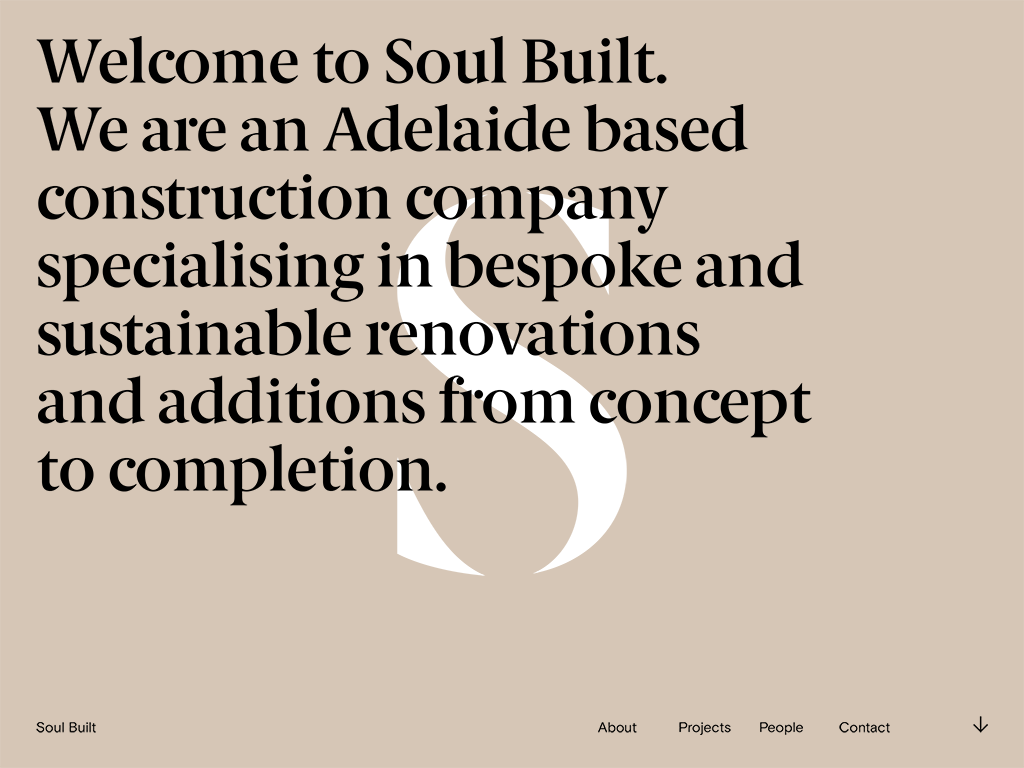
<style>
.page{position:relative;width:1024px;height:768px;background:#d6c6b6}
.page>*{position:absolute;margin:0}
.t1{font:62px "BerlingskeSerif-DemiBold";letter-spacing:-0.009em;color:#000000}
.t2{font:62px "BerlingskeSerif-DemiBold";letter-spacing:-0.079em;color:#000000}
.t3{font:62px "BerlingskeSerif-DemiBold";letter-spacing:-0.01em;color:#000000}
.t4{font:62px "BerlingskeSerif-DemiBold";letter-spacing:-0.029em;color:#000000}
.t5{font:62px "BerlingskeSerif-DemiBold";letter-spacing:-0.02em;color:#000000}
.t6{font:62px "BerlingskeSerif-DemiBold";color:#000000}
.t7{font:62px "BerlingskeSerif-DemiBold";letter-spacing:-0.04em;color:#000000}
.t8{font:62px "BerlingskeSerif-DemiBold";letter-spacing:-0.039em;color:#000000}
.t9{font:62px "BerlingskeSerif-DemiBold";letter-spacing:-0.049em;color:#000000}
.t10{font:62px "BerlingskeSerif-DemiBold";letter-spacing:-0.043em;color:#000000}
.t11{font:62px "BerlingskeSerif-DemiBold";letter-spacing:-0.05em;color:#000000}
.t12{font:14px "BasisGrotesquePro";color:#000000}
.t13{font:14px "BasisGrotesquePro";letter-spacing:-0.007em;color:#000000}
.t14{font:14px "BasisGrotesquePro";letter-spacing:-0.002em;color:#000000}
.t15{font:14px "BasisGrotesquePro";letter-spacing:-0.025em;color:#000000}
.t16{font:14px "BasisGrotesquePro";letter-spacing:-0.023em;color:#000000}
.t17{font:14px "BasisGrotesquePro";letter-spacing:-0.009em;color:#000000}
.t18{font:14px "BasisGrotesquePro";letter-spacing:-0.003em;color:#000000}
.t19{font:14px "BasisGrotesquePro";letter-spacing:-0.008em;color:#000000}
.t20{font:14px "BasisGrotesquePro";letter-spacing:-0.057em;color:#000000}
.t21{font:14px "BasisGrotesquePro";letter-spacing:-0.019em;color:#000000}
.t22{font:14px "BasisGrotesquePro";letter-spacing:-0.026em;color:#000000}
.t23{font:14px "BasisGrotesquePro";letter-spacing:-0.005em;color:#000000}
</style>
<div class="page">
<p class="t1" style="left:36px;top:36px;width:631px;height:48px"><span class="t2">W</span>e<span class="t3">l</span><span class="t4">c</span>ome to So<span class="t3">u</span>l <span class="t5">B</span>u<span class="t3">il</span>t<span class="t6">.</span></p>
<p class="t1" style="left:36px;top:104px;width:713px;height:48px"><span class="t2">W</span>e a<span class="t4">r</span>e <span class="t3">a</span>n <span class="t7">A</span>de<span class="t3">l</span>a<span class="t3">id</span>e b<span class="t3">a</span>se<span class="t6">d</span></p>
<p class="t1" style="left:38px;top:174px;width:631px;height:60px"><span class="t4">c</span>on<span class="t8">s</span>truction <span class="t4">c</span>om<span class="t3">pa</span><span class="t9">n</span><span class="t6">y</span></p>
<p class="t1" style="left:38px;top:240px;width:766px;height:62px">speci<span class="t3">a</span>li<span class="t3">s</span>ing <span class="t3">i</span>n be<span class="t3">sp</span>o<span class="t10">k</span>e an<span class="t6">d</span></p>
<p class="t1" style="left:38px;top:308px;width:662px;height:48px"><span class="t8">s</span>u<span class="t8">s</span>tainable <span class="t4">r</span>en<span class="t9">o</span><span class="t11">v</span><span class="t3">a</span>tion<span class="t6">s</span></p>
<p class="t1" style="left:38px;top:375px;width:774px;height:63px">an<span class="t3">d</span> a<span class="t3">d</span>ditions <span class="t3">f</span><span class="t4">r</span>o<span class="t3">m </span><span class="t4">c</span>on<span class="t4">c</span>ep<span class="t6">t</span></p>
<p class="t1" style="left:37px;top:444px;width:409px;height:62px">to <span class="t4">c</span>om<span class="t3">p</span>letion<span class="t6">.</span></p>
<p class="t12" style="left:36px;top:722px;width:60px;height:11px">S<span class="t13">o</span>ul Built</p>
<p class="t12" style="left:598px;top:722px;width:39px;height:11px">Ab<span class="t13">o</span><span class="t14">u</span>t</p>
<p class="t15" style="left:679px;top:722px;width:52px;height:13px">P<span class="t16">r</span><span class="t12">o</span><span class="t17">j</span><span class="t18">e</span><span class="t17">c</span><span class="t19">t</span><span class="t12">s</span></p>
<p class="t12" style="left:760px;top:722px;width:43px;height:13px"><span class="t20">P</span><span class="t18">e</span>ople</p>
<p class="t21" style="left:839px;top:722px;width:51px;height:11px">C<span class="t12">o</span><span class="t22">n</span><span class="t13">t</span><span class="t23">a</span><span class="t17">c</span><span class="t12">t</span></p>
</div>
